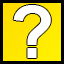
<style>
.page{position:relative;width:64px;height:64px}
.page>*{position:absolute;margin:0}
.t1{font:72px "Arial-BoldMT";color:#ffffff}
</style>
<div class="page">
<p class="t1" style="left:13px;top:5px;width:38px;height:53px">?</p>
</div>
